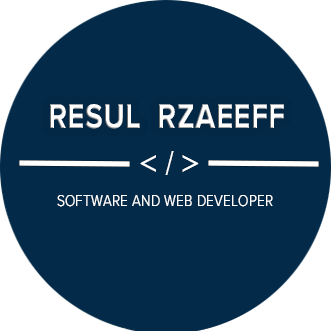
<style>
.page{position:relative;width:331px;height:331px;background:#032a49}
.page>*{position:absolute;margin:0}
.t1{font:35.4px "ProximaNova-Bold";letter-spacing:0.02em;color:#ffffff;scale:0.83 1}
.t2{font:35.4px "TimesNewRomanPS-BoldMT";letter-spacing:0.02em;color:#ffffff;scale:0.83 1}
.t3{font:16.3px "ProximaNova-Light";letter-spacing:0.02em;color:#ffffff;scale:0.83 1}
</style>
<div class="page">
<p class="t1" style="left:50px;top:104px;width:234px;height:25px">RESUL  RZAEEFF</p>
<p class="t2" style="left:140px;top:151px;width:59px;height:24px">&lt; / &gt;</p>
<p class="t3" style="left:57px;top:195px;width:216px;height:12px">SOFTWARE AND WEB DEVELOPER</p>
</div>
